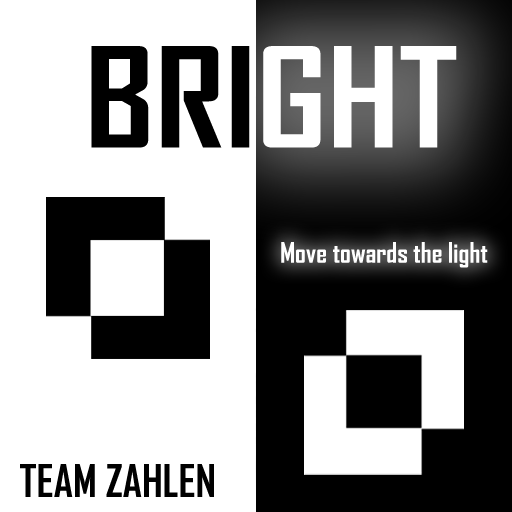
<style>
.page{position:relative;width:512px;height:512px;background:#ffffff}
.page>*{position:absolute;margin:0}
.t1{font:26.9px "AgencyFB-Bold";color:#ffffff}
.t2{font:43.2px "AgencyFB-Bold";color:#000000}
</style>
<div class="page">
<p class="t1" style="left:281px;top:242px;width:207px;height:26px">Move towards the light</p>
<p class="t2" style="left:20px;top:464px;width:194px;height:33px">TEAM ZAHLEN</p>
</div>
